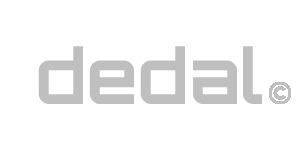
<style>
.page{position:relative;width:300px;height:150px;background:#ffffff}
.page>*{position:absolute;margin:0}
.t1{font:75px "Orbitron-Bold";color:#bfbfbf}
</style>
<div class="page">
<p class="t1" style="left:38px;top:46px;width:224px;height:58px">dedal</p>
</div>
